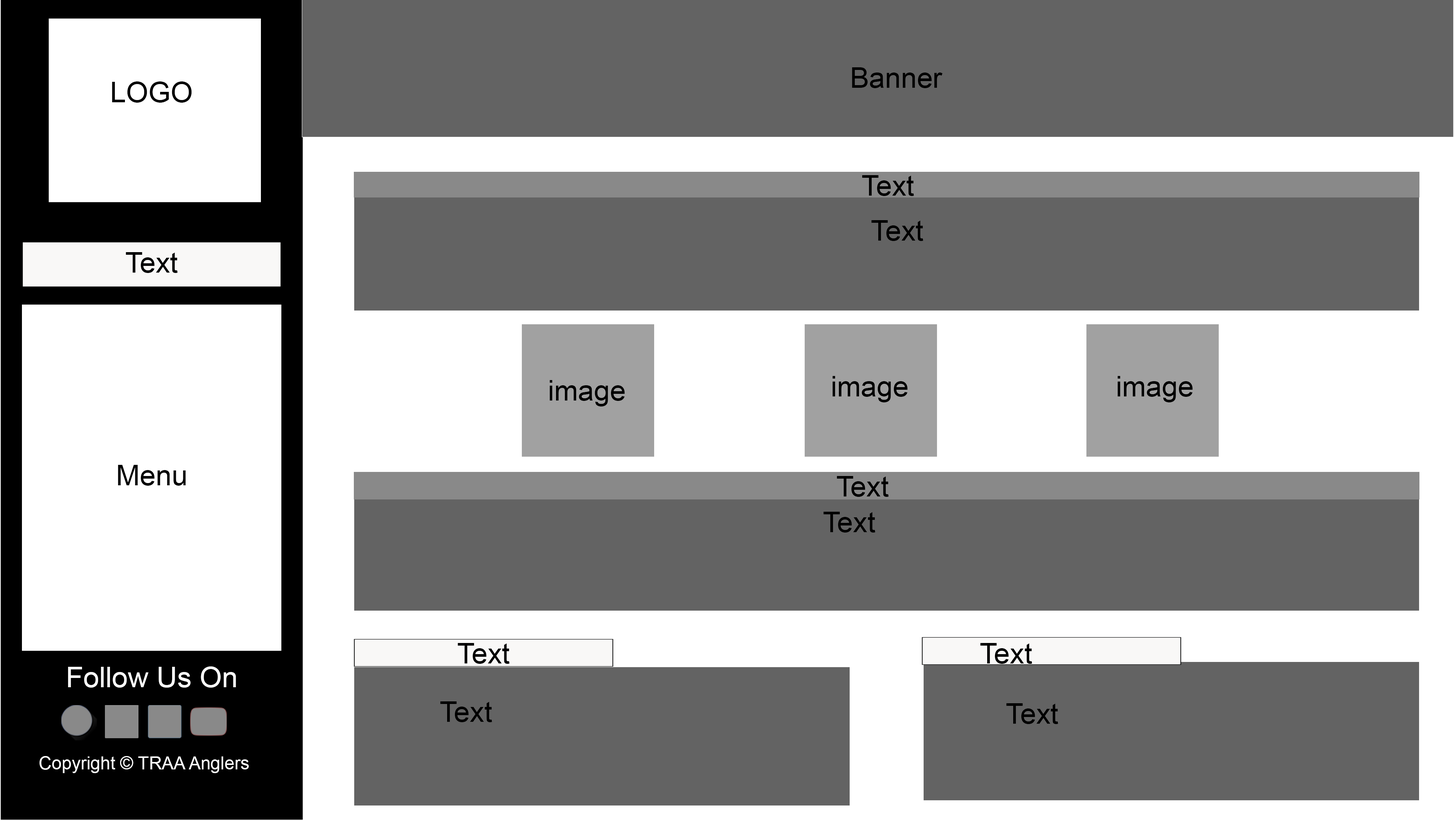
<style>
.page{position:relative;width:1454px;height:820px;background:#636363}
.page>*{position:absolute;margin:0}
.t1{font:28.7px "ArialMT";color:#000000}
.t2{font:28.7px "ArialMT";color:#ffffff}
.t3{font:17.9px "ArialMT";color:#ffffff}
</style>
<div class="page">
<p class="t1" style="left:852px;top:67px;width:91px;height:21px">Banner</p>
<p class="t1" style="left:112px;top:81px;width:80px;height:22px">LOGO</p>
<p class="t1" style="left:862px;top:175px;width:52px;height:21px">Text</p>
<p class="t1" style="left:872px;top:220px;width:52px;height:21px">Text</p>
<p class="t1" style="left:126px;top:252px;width:52px;height:21px">Text</p>
<p class="t1" style="left:833px;top:376px;width:75px;height:26px">image</p>
<p class="t1" style="left:1118px;top:376px;width:75px;height:26px">image</p>
<p class="t1" style="left:550px;top:380px;width:75px;height:26px">image</p>
<p class="t1" style="left:118px;top:465px;width:68px;height:21px">Menu</p>
<p class="t1" style="left:837px;top:476px;width:52px;height:21px">Text</p>
<p class="t1" style="left:824px;top:512px;width:52px;height:20px">Text</p>
<p class="t1" style="left:458px;top:643px;width:52px;height:21px">Text</p>
<p class="t1" style="left:980px;top:643px;width:52px;height:21px">Text</p>
<p class="t2" style="left:68px;top:666px;width:168px;height:21px">Follow Us On</p>
<p class="t1" style="left:440px;top:701px;width:52px;height:21px">Text</p>
<p class="t1" style="left:1006px;top:703px;width:53px;height:21px">Text</p>
<p class="t3" style="left:39px;top:756px;width:210px;height:17px">Copyright © TRAA Anglers</p>
</div>
